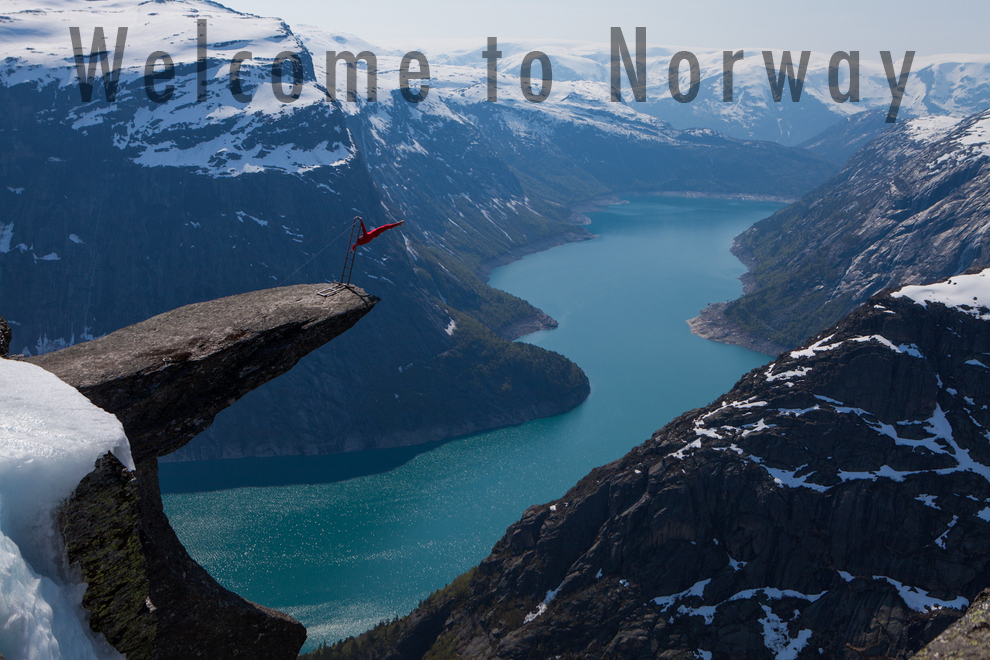
<style>
.page{position:relative;width:990px;height:660px}
.page>*{position:absolute;margin:0}
.t1{font:100px "Futura-CondensedMedium";letter-spacing:0.14em}
</style>
<div class="page">
<p class="t1" style="left:69px;top:19px;width:847px;height:104px">Welcome to Norway</p>
</div>
